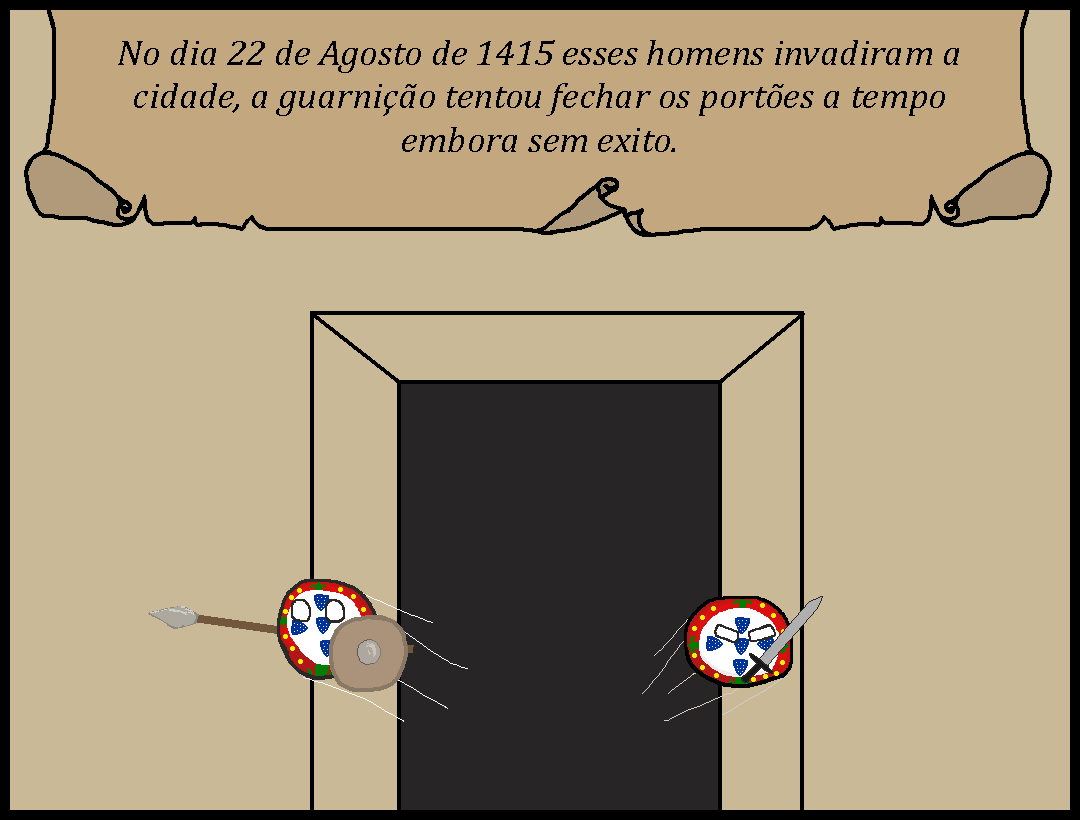
<style>
.page{position:relative;width:1080px;height:820px;background:#c9b997}
.page>*{position:absolute;margin:0}
.t1{font:36px "Cambria-Italic";color:#000000;scale:1.03 1}
</style>
<div class="page">
<p class="t1" style="left:118px;top:40px;width:841px;height:112px;text-align:center">No dia 22 de Agosto de 1415 esses homens invadiram a cidade, a guarnição tentou fechar os portões a tempo embora sem exito.</p>
</div>
